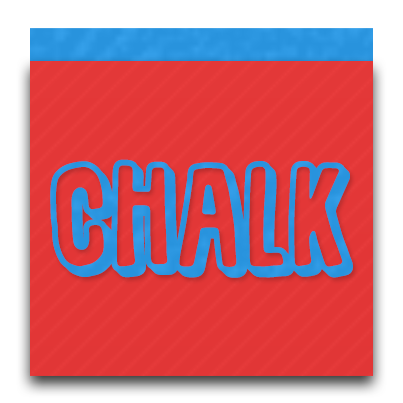
<style>
.page{position:relative;width:403px;height:403px}
.page>*{position:absolute;margin:0}
.t1{font:110px "SugarpunchDEMO";color:#35a0ea}
</style>
<div class="page">
<p class="t1" style="left:50px;top:159px;width:303px;height:119px">CHALK</p>
</div>
